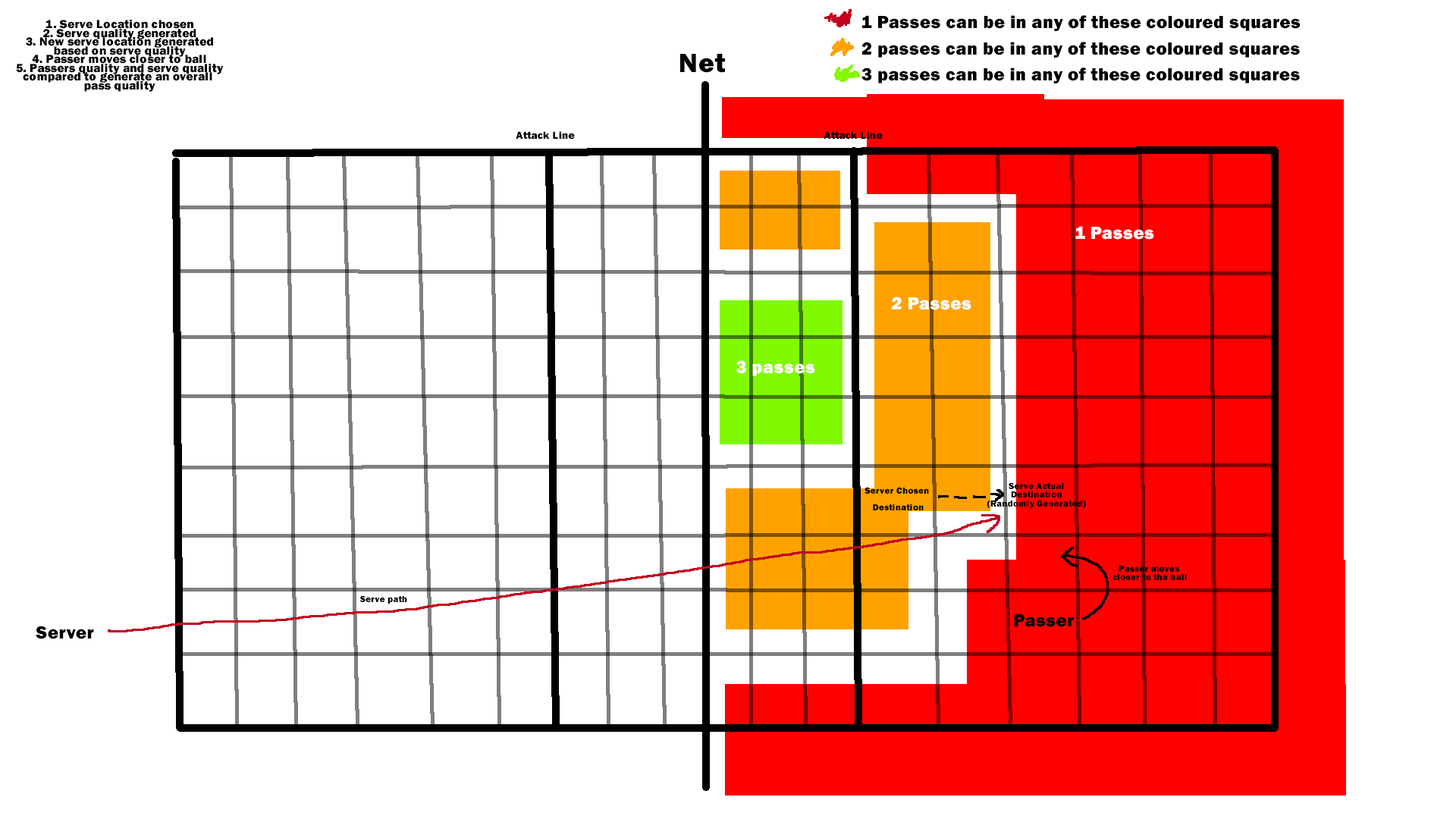
<style>
.page{position:relative;width:1456px;height:819px;background:#ffffff}
.page>*{position:absolute;margin:0}
.t1{font:18.2px/8.7px "FranklinGothic-Heavy";letter-spacing:0.02em;color:#000000}
.t2{font:12.1px/8.7px "FranklinGothic-Heavy";letter-spacing:0.02em;color:#000000}
.t3{font:27.3px "FranklinGothic-Heavy";letter-spacing:0.02em;color:#000000}
.t4{font:10.6px "FranklinGothic-Heavy";letter-spacing:0.02em;color:#000000}
.t5{font:18.2px "FranklinGothic-Heavy";letter-spacing:0.02em;color:#ffffff}
.t6{font:9.1px/8.7px "FranklinGothic-Heavy";letter-spacing:0.02em;color:#000000}
.t7{font:9.1px "FranklinGothic-Heavy";letter-spacing:0.02em;color:#000000}
.t8{font:18.2px "FranklinGothic-Heavy";letter-spacing:0.02em;color:#000000}
</style>
<div class="page">
<p class="t1" style="left:861px;top:15px;width:440px;height:68px;text-align:center">1 Passes can be in any of these coloured squares<br><br><br>2 passes can be in any of these coloured squares<br><br><br>3 passes can be in any of these coloured squares</p>
<p class="t2" style="left:16px;top:20px;width:208px;height:72px;text-align:center">1. Serve Location chosen<br>2. Serve quality generated<br>3. New serve location generated<br>based on serve quality<br>4. Passer moves closer to ball<br>5. Passers quality and serve quality<br>compared to generate an overall <br>pass quality</p>
<p class="t3" style="left:680px;top:54px;width:45px;height:19px">Net</p>
<p class="t4" style="left:516px;top:131px;width:59px;height:9px">Attack Line</p>
<p class="t4" style="left:824px;top:131px;width:59px;height:9px">Attack Line</p>
<p class="t5" style="left:1075px;top:226px;width:79px;height:14px">1 Passes</p>
<p class="t5" style="left:892px;top:297px;width:79px;height:13px">2 Passes</p>
<p class="t5" style="left:736px;top:360px;width:79px;height:16px">3 passes</p>
<p class="t6" style="left:987px;top:482px;width:99px;height:26px;text-align:center">Serve Actual<br>Destination<br>(Randomly Generated)</p>
<p class="t6" style="left:864px;top:487px;width:65px;height:23px;text-align:center">Server Chosen <br><br>Destination</p>
<p class="t6" style="left:1112px;top:566px;width:75px;height:14px;text-align:center">Passer moves <br>closer to the ball</p>
<p class="t7" style="left:359px;top:595px;width:48px;height:9px">Serve path</p>
<p class="t8" style="left:1014px;top:614px;width:60px;height:13px">Passer</p>
<p class="t8" style="left:36px;top:626px;width:58px;height:13px">Server</p>
</div>
